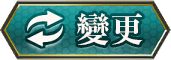
<style>
.page{position:relative;width:171px;height:60px}
.page>*{position:absolute;margin:0}
.t1{font:34px "RyuminPr6N-ExBold";color:#fff6f2}
</style>
<div class="page">
<p class="t1" style="left:77px;top:13px;width:66px;height:33px">變更</p>
</div>
